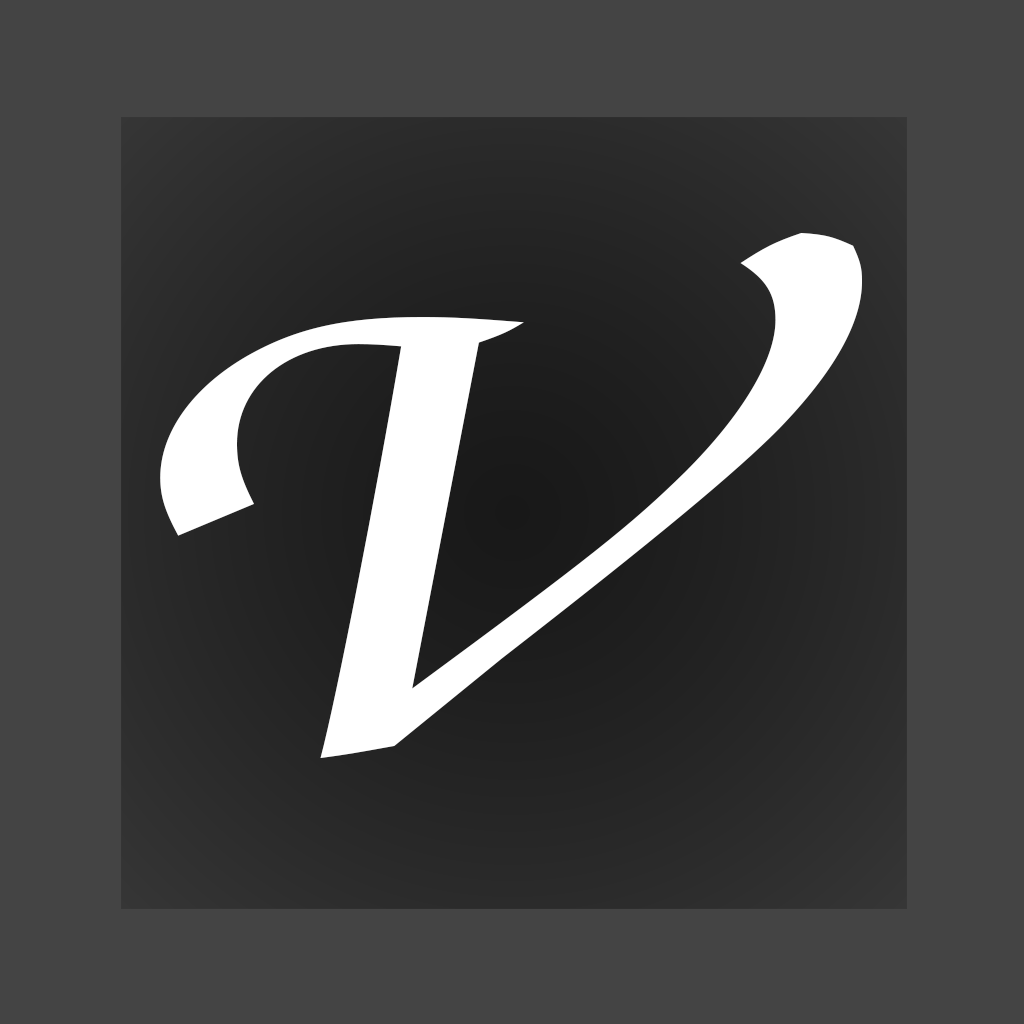
<style>
.page{position:relative;width:1024px;height:1024px;background:#444444}
.page>*{position:absolute;margin:0}
.t1{font:753.3px "TeXGyreChorus-MediumItalic";color:#ffffff;scale:1.32 1}
</style>
<div class="page">
<p class="t1" style="left:160px;top:233px;width:702px;height:525px">V</p>
</div>
